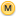
<style>
.page{position:relative;width:16px;height:16px}
.page>*{position:absolute;margin:0}
.t1{font:8px "ArialMT";color:#383838;font-weight:bold;scale:1.18 1}
</style>
<div class="page">
<p class="t1" style="left:4px;top:5px;width:8px;height:6px">M</p>
</div>
